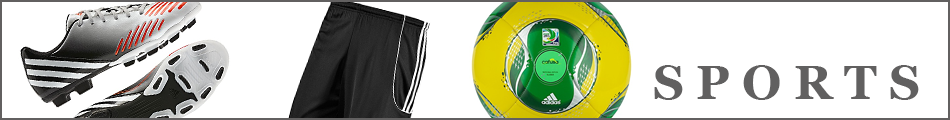
<style>
.page{position:relative;width:950px;height:120px;background:#ffffff}
.page>*{position:absolute;margin:0}
.t1{font:48px "Georgia-Bold";color:#616060}
</style>
<div class="page">
<p class="t1" style="left:654px;top:65px;width:265px;height:35px">S P O R T S</p>
</div>
